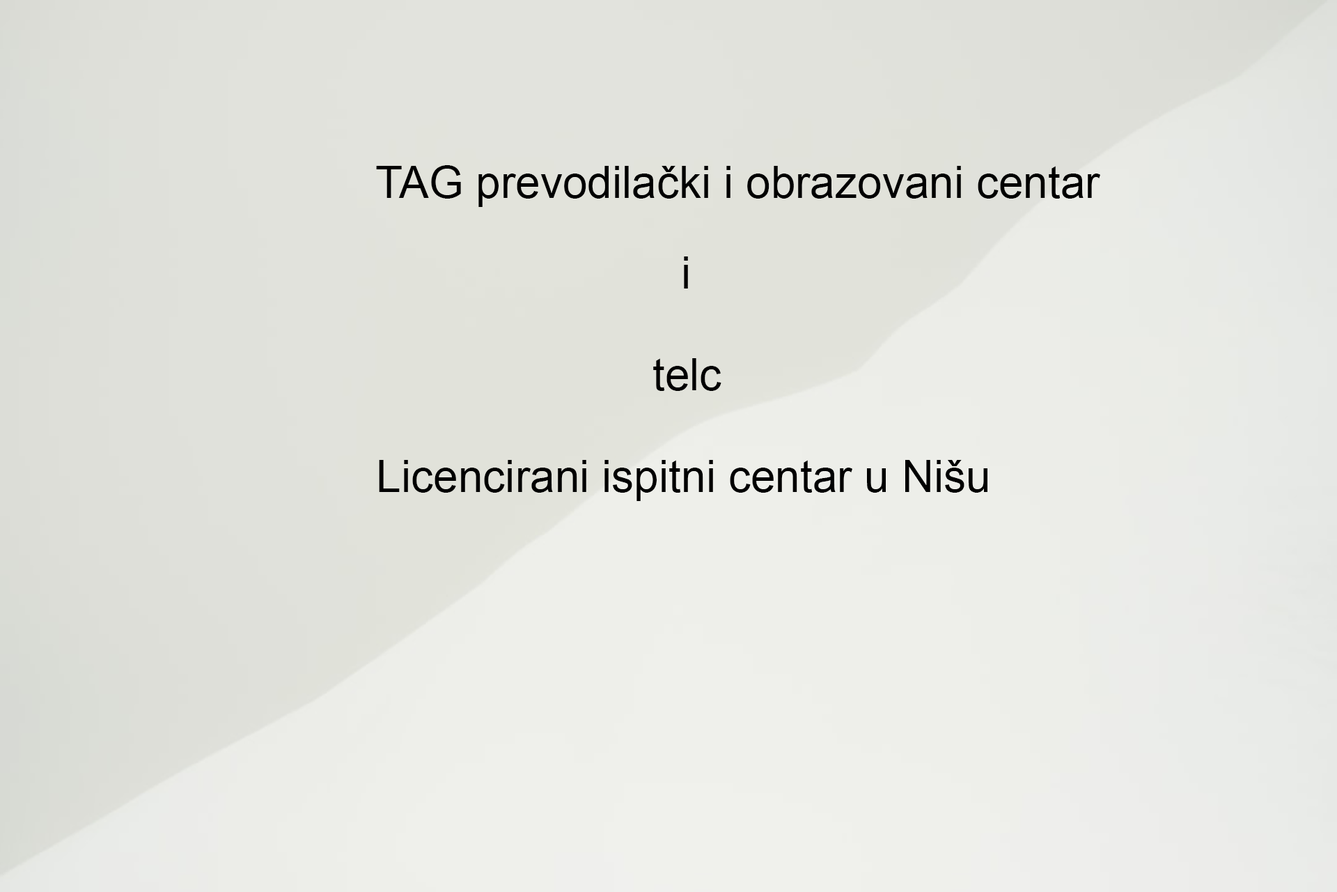
<style>
.page{position:relative;width:1337px;height:892px}
.page>*{position:absolute;margin:0}
.t1{font:44.6px "ArialMT";color:#000000}
</style>
<div class="page">
<p class="t1" style="left:376px;top:165px;width:725px;height:42px">TAG prevodilački i obrazovani centar</p>
<p class="t1" style="left:684px;top:256px;width:4px;height:32px">i</p>
<p class="t1" style="left:653px;top:358px;width:69px;height:33px">telc</p>
<p class="t1" style="left:379px;top:460px;width:609px;height:41px">Licencirani ispitni centar u Nišu</p>
</div>
